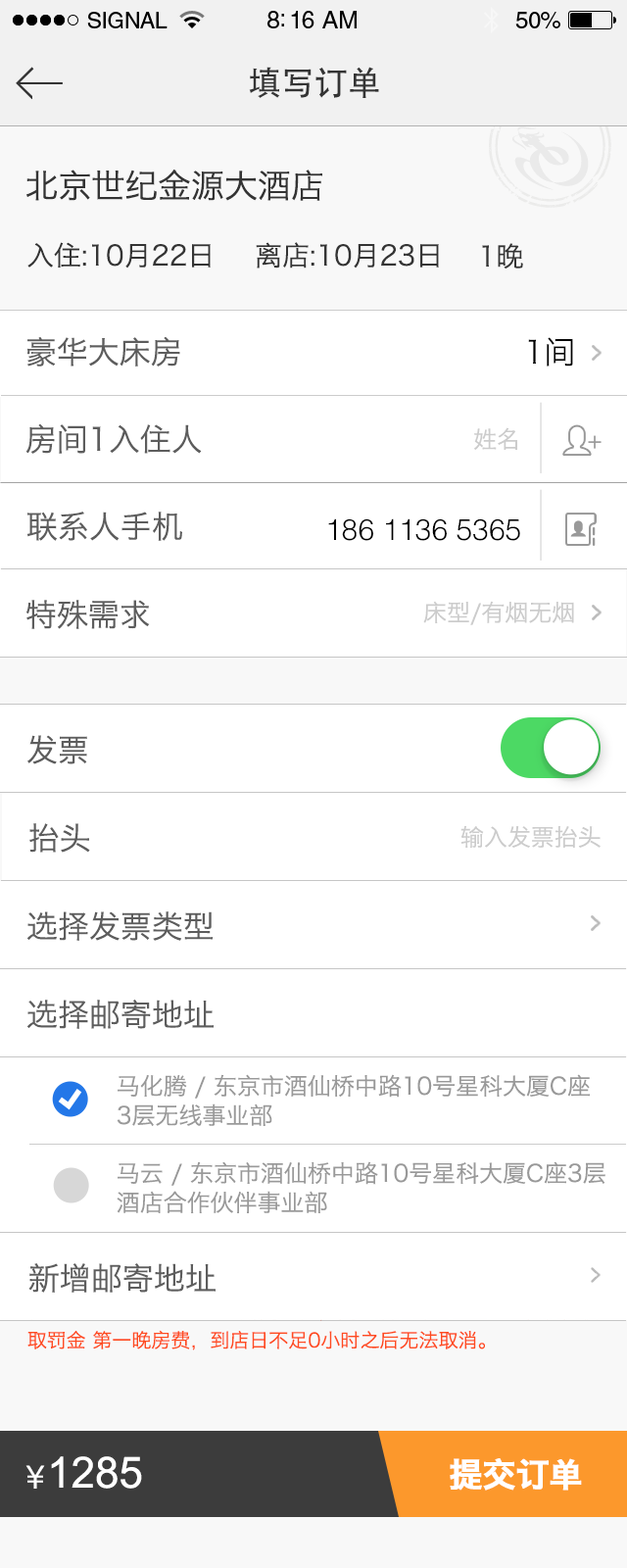
<style>
.page{position:relative;width:627px;height:1568px;background:#ffffff}
.page>*{position:absolute;margin:0}
.t1{font:33.3px "STHeitiSC-Medium";color:#343434}
.t2{font:33.3px "HiraginoSansGB-W3";letter-spacing:-0.03em;color:#343434;font-weight:bold}
.t3{font:27.4px "HiraginoSansGB-W3";color:#343434}
.t4{font:31.4px "HiraginoSansGB-W3";color:#5d5d5d}
.t5{font:31.4px "HiraginoSansGB-W3";color:#000000}
.t6{font:23.5px "HiraginoSansGB-W3";color:#cccccc}
.t7{font:29.4px "Helvetica-Light";color:#000000}
.t8{font:23.5px/29.4px "HiraginoSansGB-W3";color:#999999}
.t9{font:19.6px/29.4px "HiraginoSansGB-W3"}
.t10{font:43.1px "ArialMT";color:#ffffff}
.t11{font:33.3px "STHeitiSC-Medium";color:#ffffff}
.t12{font:33.3px "HiraginoSansGB-W6";letter-spacing:-0.03em;color:#ffffff;font-weight:bold}
</style>
<div class="page">
<p class="t1" style="left:249px;top:67px;width:130px;height:31px">填写订单</p>
<p class="t2" style="left:26px;top:170px;width:296px;height:31px">北京世纪金源大酒店</p>
<p class="t3" style="left:27px;top:242px;width:184px;height:27px">入住:10月22日</p>
<p class="t3" style="left:256px;top:242px;width:183px;height:27px">离店:10月23日</p>
<p class="t3" style="left:482px;top:243px;width:41px;height:26px">1晚</p>
<p class="t4" style="left:27px;top:336px;width:153px;height:31px">豪华大床房</p>
<p class="t5" style="left:528px;top:337px;width:45px;height:30px">1间</p>
<p class="t4" style="left:25px;top:423px;width:177px;height:31px">房间1入住人</p>
<p class="t6" style="left:474px;top:427px;width:43px;height:23px">姓名</p>
<p class="t4" style="left:27px;top:512px;width:155px;height:29px">联系人手机</p>
<p class="t7" style="left:328px;top:518px;width:192px;height:23px">186 1136 5365</p>
<p class="t4" style="left:26px;top:600px;width:124px;height:29px">特殊需求</p>
<p class="t6" style="left:423px;top:601px;width:151px;height:24px">床型/有烟无烟</p>
<p class="t4" style="left:27px;top:735px;width:60px;height:29px">发票</p>
<p class="t4" style="left:29px;top:823px;width:61px;height:30px">抬头</p>
<p class="t6" style="left:461px;top:825px;width:140px;height:23px">输入发票抬头</p>
<p class="t4" style="left:26px;top:911px;width:187px;height:30px">选择发票类型</p>
<p class="t4" style="left:26px;top:1000px;width:188px;height:29px">选择邮寄地址</p>
<p class="t8" style="left:117px;top:1074px;width:473px;height:52px">马化腾 / 东京市酒仙桥中路10号星科大厦C座<br>3层无线事业部</p>
<p class="t8" style="left:117px;top:1161px;width:489px;height:52px">马云 / 东京市酒仙桥中路10号星科大厦C座3层<br>酒店合作伙伴事业部</p>
<p class="t4" style="left:28px;top:1263px;width:188px;height:30px">新增邮寄地址</p>
<p class="t9" style="left:27px;top:1301px;width:572px;height:49px">在13.11.28到13.11.29期间入住，离到店日不足48小时取消将收<br>取罚金 第一晚房费，到店日不足0小时之后无法取消。</p>
<p class="t10" style="left:51px;top:1456px;width:91px;height:33px">1285</p>
<p class="t11" style="left:25px;top:1465px;width:20px;height:24px">￥</p>
<p class="t12" style="left:450px;top:1458px;width:132px;height:33px">提交订单</p>
</div>
